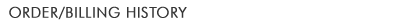
<style>
.page{position:relative;width:400px;height:24px;background:#ffffff}
.page>*{position:absolute;margin:0}
.t1{font:14.7px "FuturaBT-Light";letter-spacing:0.025em;color:#363636;text-transform:uppercase;font-weight:bold}
</style>
<div class="page">
<p class="t1" style="left:9px;top:6px;width:178px;height:14px">ORDER/BILLING HISTORY</p>
</div>
